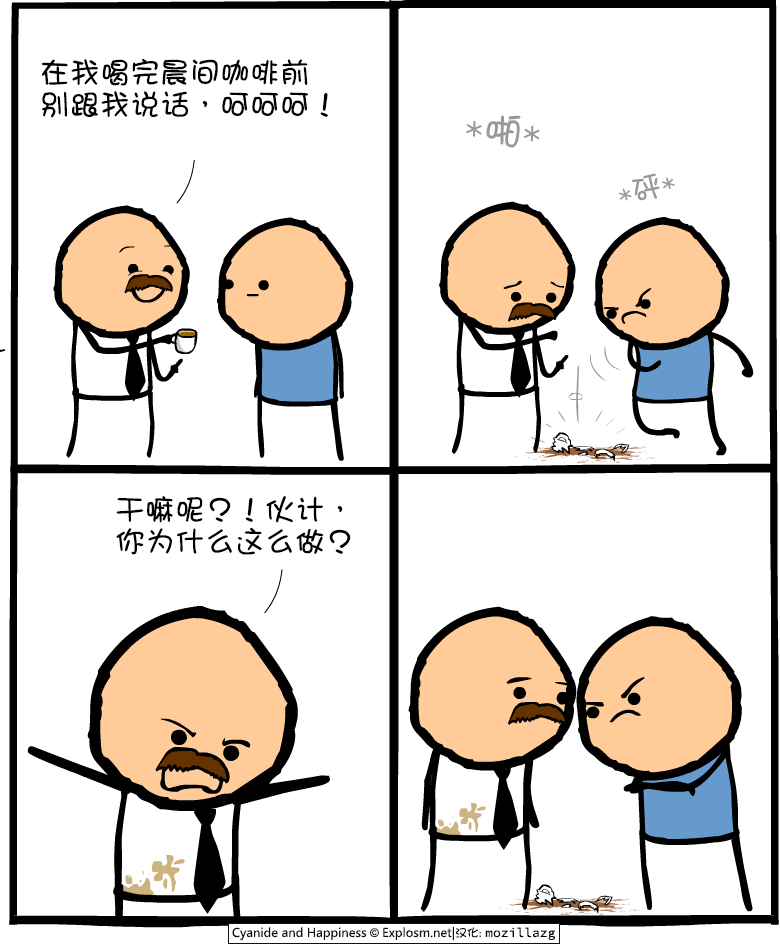
<style>
.page{position:relative;width:780px;height:950px;background:#ffffff}
.page>*{position:absolute;margin:0}
.t1{font:30px/32px "DFGirl";color:#000000}
.t2{font:39px "DFGirl";color:#999999}
.t3{font:30px "DFGirl";color:#999999}
</style>
<div class="page">
<p class="t1" style="left:41px;top:58px;width:287px;height:60px">在我喝完晨间咖啡前<br>别跟我说话，呵呵呵！</p>
<p class="t2" style="left:466px;top:115px;width:74px;height:33px;rotate:5deg">*啪*</p>
<p class="t3" style="left:618px;top:173px;width:57px;height:28px;rotate:-15deg">*砰*</p>
<p class="t1" style="left:116px;top:496px;width:235px;height:59px">干嘛呢？！伙计，<br>你为什么这么做？</p>
</div>
